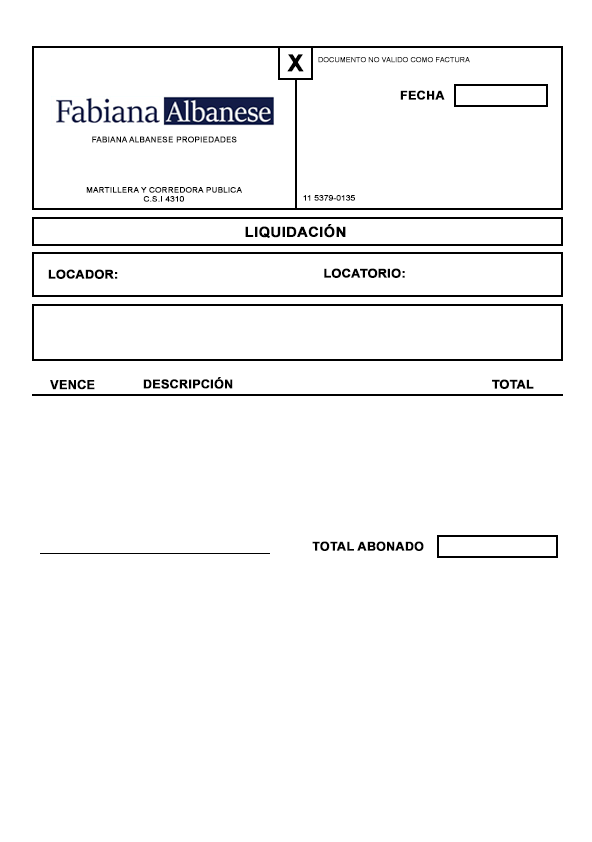
<style>
.page{position:relative;width:592px;height:842px;background:#ffffff}
.page>*{position:absolute;margin:0}
.t1{font:23.5px "Arial-BoldMT";letter-spacing:0.01em;color:#000000;font-weight:bold}
.t2{font:7px "ArialMT";letter-spacing:0.01em;color:#000000;font-weight:bold}
.t3{font:12.2px "Arial-BoldMT";letter-spacing:0.01em;color:#000000;font-weight:bold}
.t4{font:8px "ArialMT";letter-spacing:0.01em;color:#000000;font-weight:bold}
.t5{font:7.6px "ArialMT";letter-spacing:0.01em;color:#000000;font-weight:bold;scale:1.06 1}
.t6{font:7.6px "ArialMT";letter-spacing:0.01em;color:#000000;font-weight:bold;scale:1.05 1}
.t7{font:13.8px "Arial-BoldMT";letter-spacing:0.01em;color:#000000;font-weight:bold;scale:1.05 1}
.t8{font:12px "Arial-BoldMT";letter-spacing:0.01em;color:#000000;font-weight:bold;scale:1.04 1}
.t9{font:12.4px "Arial-BoldMT";letter-spacing:0.01em;color:#000000;font-weight:bold}
.t10{font:12.1px "Arial-BoldMT";letter-spacing:0.01em;color:#000000;font-weight:bold}
</style>
<div class="page">
<p class="t1" style="left:287px;top:54px;width:17px;height:18px">X</p>
<p class="t2" style="left:318px;top:57px;width:152px;height:6px">DOCUMENTO NO VALIDO COMO FACTURA</p>
<p class="t3" style="left:400px;top:90px;width:45px;height:10px">FECHA</p>
<p class="t4" style="left:92px;top:136px;width:145px;height:7px">FABIANA ALBANESE PROPIEDADES</p>
<p class="t5" style="left:86px;top:187px;width:156px;height:15px;text-align:center">MARTILLERA Y CORREDORA PUBLICA<br>C.S.I 4310</p>
<p class="t6" style="left:303px;top:195px;width:52px;height:6px">11 5379-0135</p>
<p class="t7" style="left:245px;top:224px;width:101px;height:14px">LIQUIDACIÓN</p>
<p class="t8" style="left:48px;top:269px;width:70px;height:10px">LOCADOR:</p>
<p class="t3" style="left:324px;top:268px;width:81px;height:10px">LOCATORIO:</p>
<p class="t3" style="left:143px;top:377px;width:90px;height:12px">DESCRIPCIÓN</p>
<p class="t9" style="left:50px;top:379px;width:45px;height:11px">VENCE</p>
<p class="t10" style="left:492px;top:379px;width:42px;height:10px">TOTAL</p>
<p class="t3" style="left:312px;top:541px;width:112px;height:10px">TOTAL ABONADO</p>
</div>
